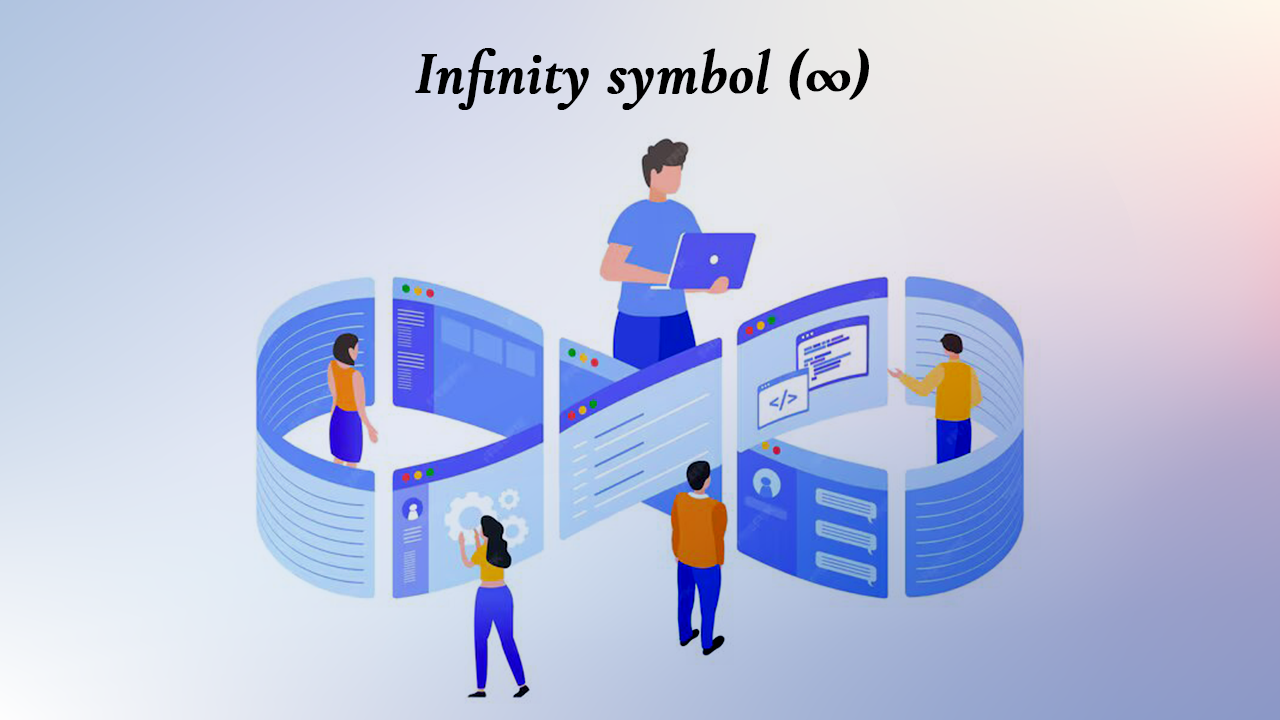
<style>
.page{position:relative;width:1280px;height:720px}
.page>*{position:absolute;margin:0}
.t1{font:60px "CormorantGaramond-BoldItalic";color:#000000;font-weight:bold}
</style>
<div class="page">
<p class="t1" style="left:415px;top:48px;width:454px;height:62px">Infinity symbol (∞)</p>
</div>
